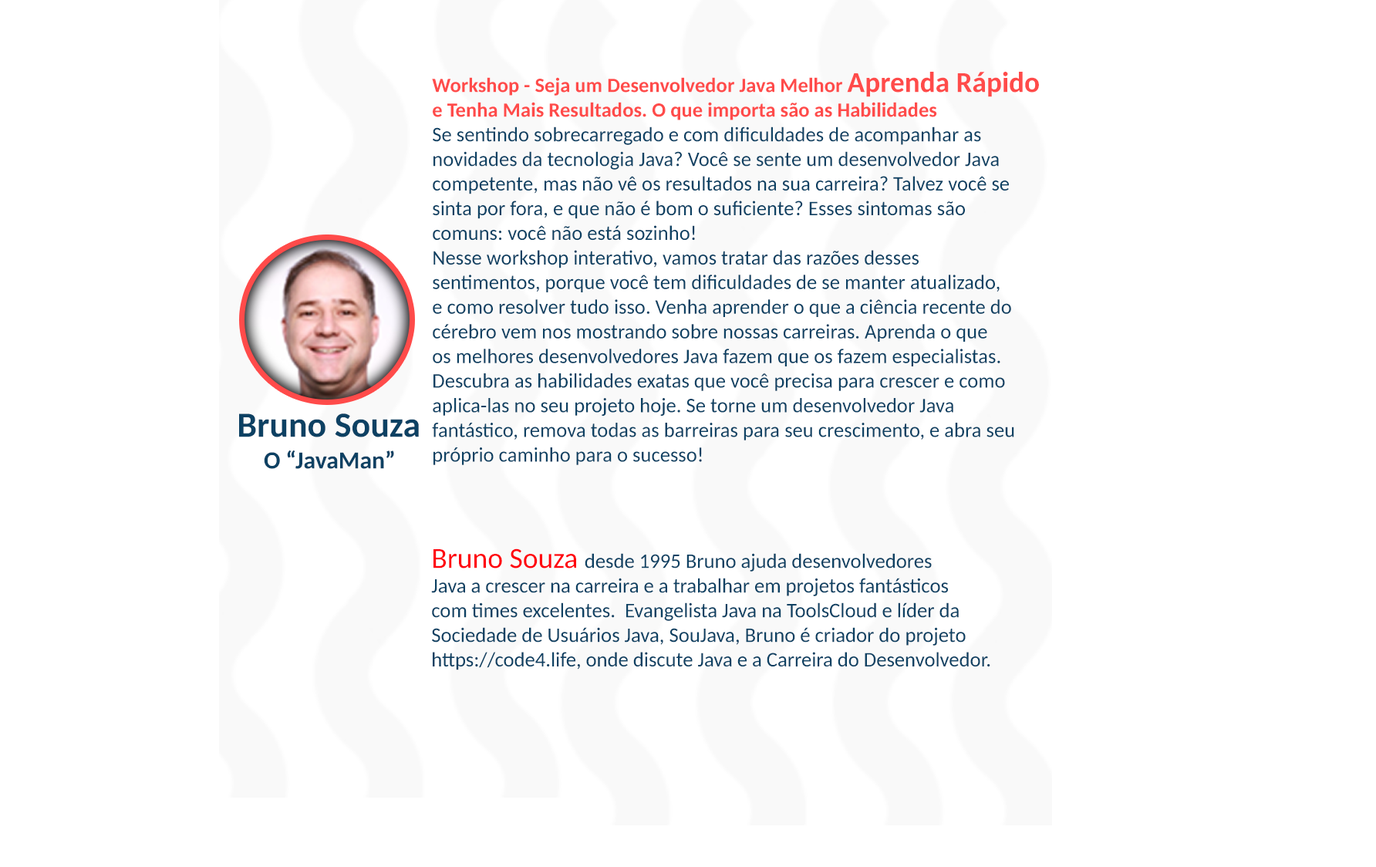
<style>
.page{position:relative;width:1376px;height:867px;background:#ffffff}
.page>*{position:absolute;margin:0}
.t1{font:20.5px "Carlito";color:#0d4163}
.t2{font:20.5px "Carlito-Bold";color:#ff4b4a}
.t3{font:28.7px "Carlito-Bold";color:#ff4b4a}
.t4{font:35.3px "Carlito-Bold";color:#0d4163}
.t5{font:24.3px "Carlito-Bold";color:#0d4163}
.t6{font:28.9px "Carlito";color:#ff010d}
</style>
<div class="page">
<p class="t1" style="left:432px;top:72px;width:607px;height:393px"><span class="t2">Workshop - Seja um Desenvolvedor Java Melhor </span><span class="t3">Aprenda Rápido</span><span class="t2"> <br>e Tenha Mais Resultados. O que importa são as Habilidades <br></span>Se sentindo sobrecarregado e com dificuldades de acompanhar as <br>novidades da tecnologia Java? Você se sente um desenvolvedor Java <br>competente, mas não vê os resultados na sua carreira? Talvez você se <br>sinta por fora, e que não é bom o suficiente? Esses sintomas são <br>comuns: você não está sozinho!<br>Nesse workshop interativo, vamos tratar das razões desses <br>sentimentos, porque você tem dificuldades de se manter atualizado, <br>e como resolver tudo isso. Venha aprender o que a ciência recente do <br>cérebro vem nos mostrando sobre nossas carreiras. Aprenda o que <br>os melhores desenvolvedores Java fazem que os fazem especialistas. <br>Descubra as habilidades exatas que você precisa para crescer e como <br>aplica-las no seu projeto hoje. Se torne um desenvolvedor Java <br>fantástico, remova todas as barreiras para seu crescimento, e abra seu <br>próprio caminho para o sucesso!</p>
<p class="t4" style="left:239px;top:413px;width:180px;height:24px">Bruno Souza</p>
<p class="t5" style="left:264px;top:450px;width:130px;height:19px">O “JavaMan”</p>
<p class="t1" style="left:431px;top:548px;width:559px;height:122px"><span class="t6">Bruno Souza </span>desde 1995 Bruno ajuda desenvolvedores <br>Java a crescer na carreira e a trabalhar em projetos fantásticos <br>com times excelentes.  Evangelista Java na ToolsCloud e líder da <br>Sociedade de Usuários Java, SouJava, Bruno é criador do projeto <br>https://code4.life, onde discute Java e a Carreira do Desenvolvedor.</p>
</div>
